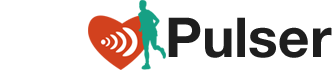
<style>
.page{position:relative;width:333px;height:70px;background:#ffffff}
.page>*{position:absolute;margin:0}
.t1{font:55px "HelveticaNeue-Bold";color:#1e1e1e}
</style>
<div class="page">
<p class="t1" style="left:168px;top:17px;width:164px;height:41px">Pulser</p>
</div>
